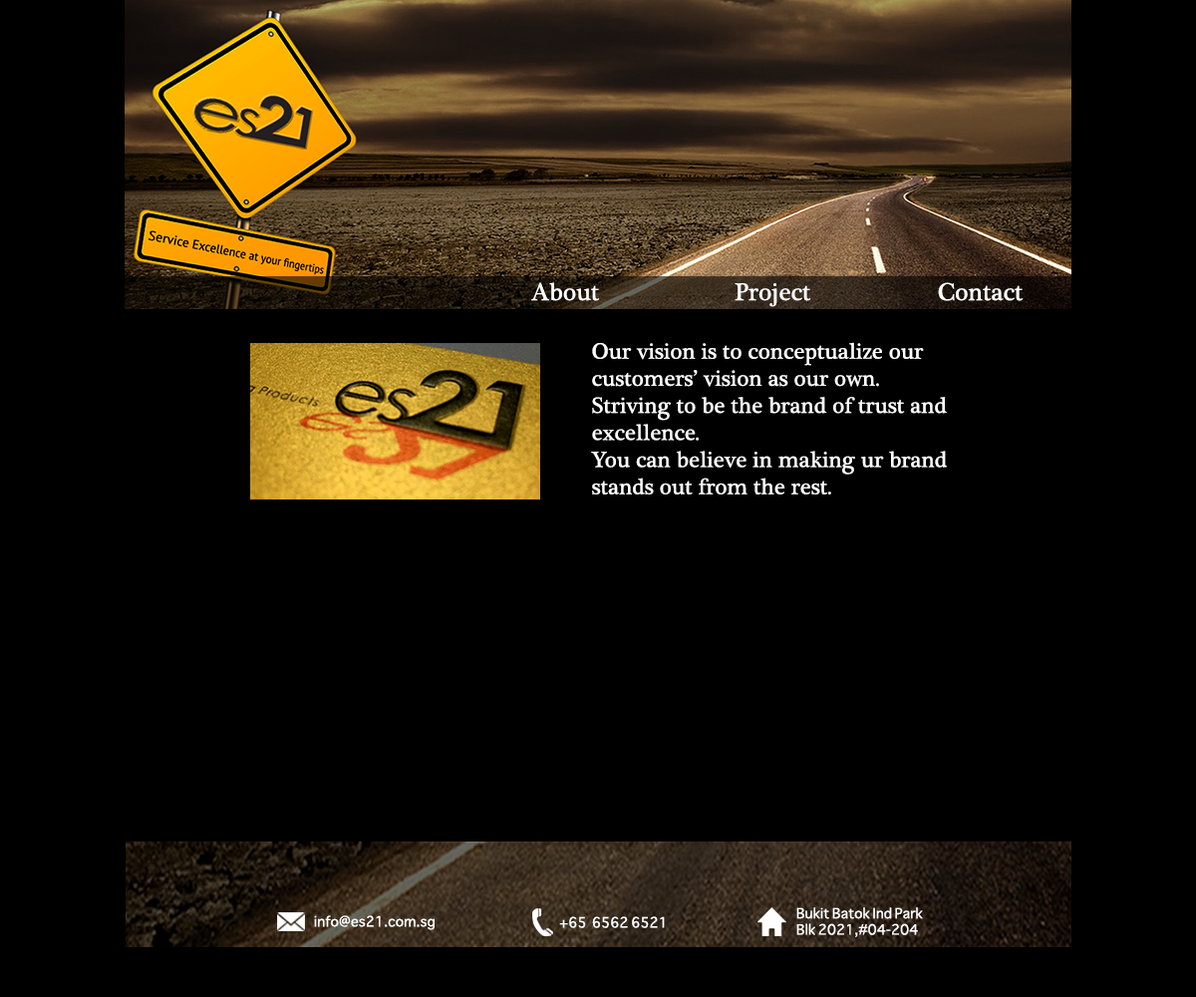
<style>
.page{position:relative;width:1196px;height:997px;background:#000000}
.page>*{position:absolute;margin:0}
.t1{font:24.9px "PlantagenetCherokee";color:#fefefe}
.t2{font:22.6px "PlantagenetCherokee";color:#fefefe}
.t3{font:13.6px "Sathu";color:#ffffff}
.t4{font:13.5px "Sathu";color:#ffffff}
</style>
<div class="page">
<p class="t1" style="left:531px;top:282px;width:69px;height:19px">About</p>
<p class="t1" style="left:735px;top:283px;width:76px;height:24px">Project</p>
<p class="t1" style="left:938px;top:282px;width:86px;height:19px">Contact</p>
<p class="t2" style="left:591px;top:342px;width:356px;height:152px">Our vision is to conceptualize our <br>customers’ vision as our own.<br>Striving to be the brand of trust and <br>excellence.<br>You can believe in making ur brand <br>stands out from the rest.</p>
<p class="t3" style="left:314px;top:915px;width:121px;height:15px">info@es21.com.sg</p>
<p class="t3" style="left:559px;top:916px;width:106px;height:12px">+65  6562 6521</p>
<p class="t4" style="left:796px;top:907px;width:127px;height:30px">Bukit Batok Ind Park<br>Blk 2021,#04-204</p>
</div>
